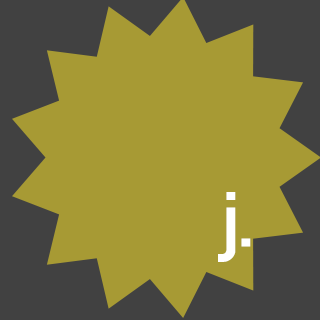
<style>
.page{position:relative;width:320px;height:320px;background:#a79a34}
.page>*{position:absolute;margin:0}
.t1{font:87px "Proletarian";color:#ffffff;scale:1.1 1}
</style>
<div class="page">
<p class="t1" style="left:218px;top:192px;width:33px;height:70px">j.</p>
</div>
